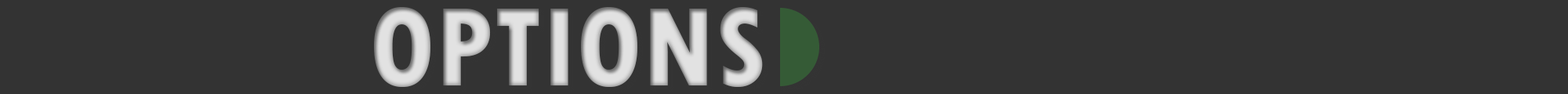
<style>
.page{position:relative;width:1568px;height:94px;background:#333333}
.page>*{position:absolute;margin:0}
.t1{font:117.6px "TwCenMT-CondensedExtraBold";color:#e2e2e2}
</style>
<div class="page">
<p class="t1" style="left:374px;top:7px;width:389px;height:80px">OPTIONS</p>
</div>
